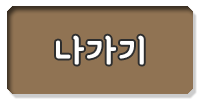
<style>
.page{position:relative;width:200px;height:100px;background:#907353}
.page>*{position:absolute;margin:0}
.t1{font:48.9px "YanoljaYacheR";color:#ffffff}
</style>
<div class="page">
<p class="t1" style="left:56px;top:35px;width:88px;height:30px">나가기</p>
</div>
